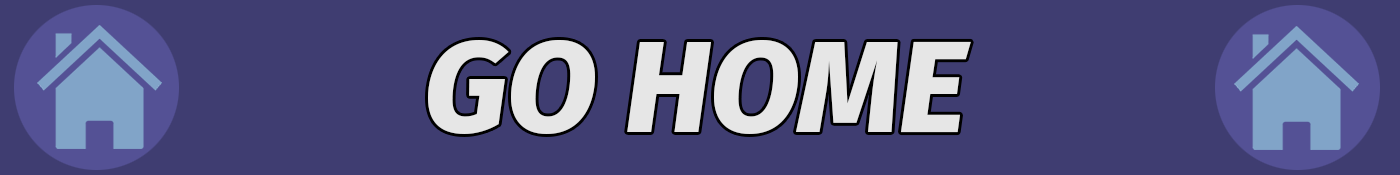
<style>
.page{position:relative;width:1400px;height:175px;background:#3f3d71}
.page>*{position:absolute;margin:0}
.t1{font:131px "FiraSans-ExtraBoldItalic";color:#e6e6e6}
</style>
<div class="page">
<p class="t1" style="left:428px;top:39px;width:543px;height:95px">GO HOME</p>
</div>
